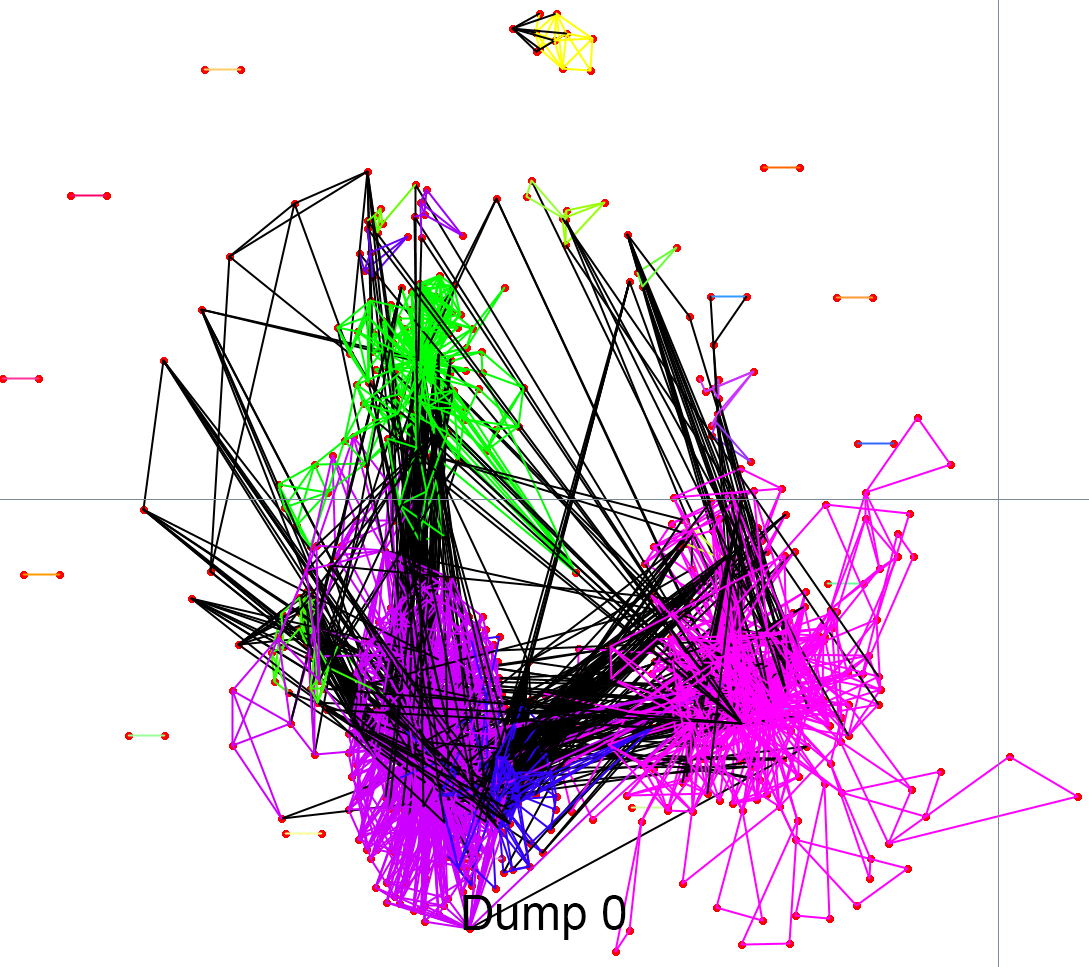
<style>
.page{position:relative;width:1089px;height:967px;background:#ffffff}
.page>*{position:absolute;margin:0}
.t1{font:48px "ArialMT";color:#000000}
</style>
<div class="page">
<p class="t1" style="left:463px;top:895px;width:163px;height:45px">Dump 0</p>
</div>
